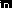
<style>
.page{position:relative;width:12px;height:8px;background:#000000}
.page>*{position:absolute;margin:0}
.t1{font:8px "PixelOperator8";color:#ffffff}
</style>
<div class="page">
<p class="t1" style="left:0px;top:1px;width:9px;height:7px">in</p>
</div>
